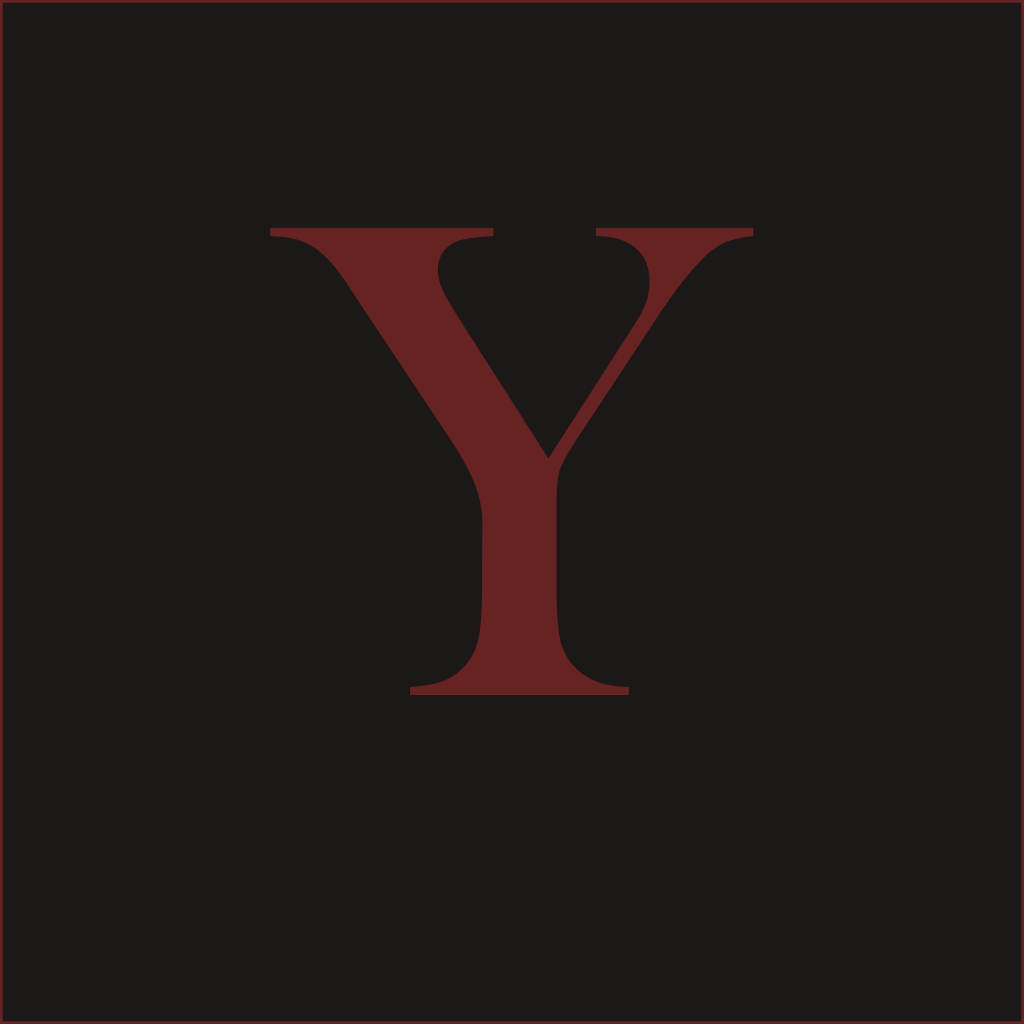
<style>
.page{position:relative;width:1024px;height:1024px;background:#1c1818}
.page>*{position:absolute;margin:0}
.t1{font:700px "BaskOldFace";color:#672222}
</style>
<div class="page">
<p class="t1" style="left:270px;top:227px;width:484px;height:468px">Y</p>
</div>
